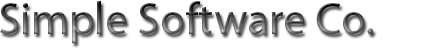
<style>
.page{position:relative;width:421px;height:50px;background:#ffffff}
.page>*{position:absolute;margin:0}
.t1{font:45.2px "MyriadPro-Regular";color:#000000}
</style>
<div class="page">
<p class="t1" style="left:0px;top:1px;width:373px;height:42px">Simple Software Co.</p>
</div>
